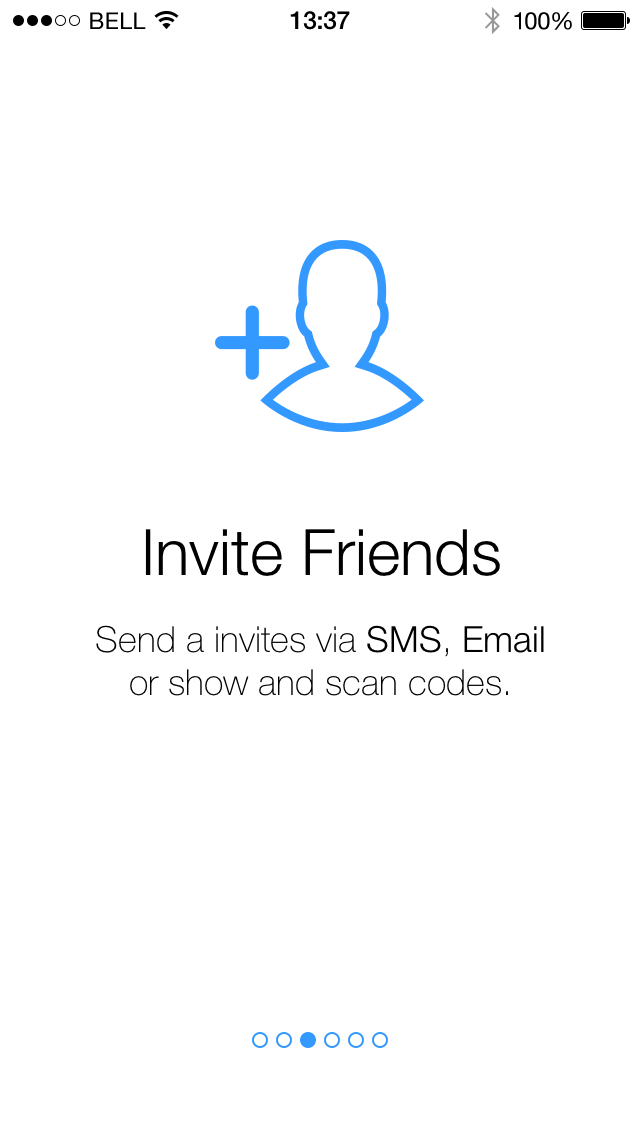
<style>
.page{position:relative;width:640px;height:1136px;background:#ffffff}
.page>*{position:absolute;margin:0}
.t1{font:64px "HelveticaNeue-Light";color:#000000}
.t2{font:36px "HelveticaNeue-Thin";color:#000000}
.t3{font:36px "HelveticaNeue-Light";color:#000000}
</style>
<div class="page">
<p class="t1" style="left:145px;top:529px;width:355px;height:47px">Invite Friends</p>
<p class="t2" style="left:96px;top:625px;width:448px;height:71px;text-align:center">Send a invites via <span class="t3">SMS</span>, <span class="t3">Email</span><br>or show and scan codes.</p>
</div>
